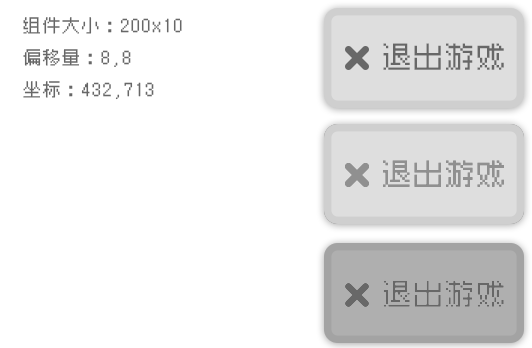
<style>
.page{position:relative;width:532px;height:348px;background:#ffffff}
.page>*{position:absolute;margin:0}
.t1{font:17.7px/31.8px "Zpix";color:#676767}
.t2{font:28.8px "Zpix";color:#676767}
.t3{font:28.6px "Zpix";color:#909090}
</style>
<div class="page">
<p class="t1" style="left:23px;top:17px;width:159px;height:83px">组件大小：200x10<br>偏移量：8,8<br>坐标：432,713</p>
<p class="t2" style="left:383px;top:43px;width:121px;height:27px">退出游戏</p>
<p class="t3" style="left:383px;top:160px;width:121px;height:27px">退出游戏</p>
<p class="t2" style="left:383px;top:280px;width:121px;height:27px">退出游戏</p>
</div>
